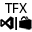
<style>
.page{position:relative;width:32px;height:32px;background:#ffffff}
.page>*{position:absolute;margin:0}
.t1{font:14.6px "MyriadPro-Regular";color:#000000}
.t2{font:18.3px "MyriadPro-Regular";color:#000000}
</style>
<div class="page">
<p class="t1" style="left:5px;top:3px;width:22px;height:10px">TFX</p>
<p class="t2" style="left:15px;top:17px;width:2px;height:13px">I</p>
</div>
